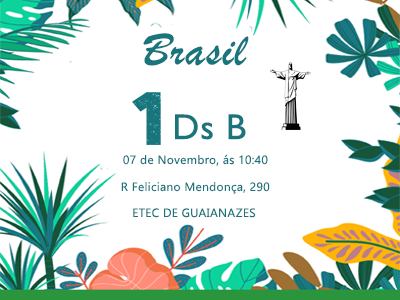
<style>
.page{position:relative;width:400px;height:300px;background:#ffffff}
.page>*{position:absolute;margin:0}
.t1{font:48px "BrushScriptMT";letter-spacing:0.025em;color:#19757c}
.t2{font:36px "BrushScriptMT";letter-spacing:0.025em;color:#19757c}
.t3{font:36px "GillSansMT";letter-spacing:0.025em;color:#19757c}
.t4{font:12px "KhmerUI";letter-spacing:0.025em;color:#19757c}
</style>
<div class="page">
<p class="t1" style="left:143px;top:33px;width:106px;height:33px;text-align:center">Brasil<br><span class="t2">ilil</span></p>
<p class="t3" style="left:175px;top:114px;width:71px;height:26px">Ds B</p>
<p class="t4" style="left:123px;top:154px;width:145px;height:12px">07 de Novembro, ás 10:40</p>
<p class="t4" style="left:121px;top:182px;width:149px;height:12px">R Feliciano Mendonça, 290</p>
<p class="t4" style="left:133px;top:208px;width:123px;height:10px">ETEC DE GUAIANAZES</p>
</div>
